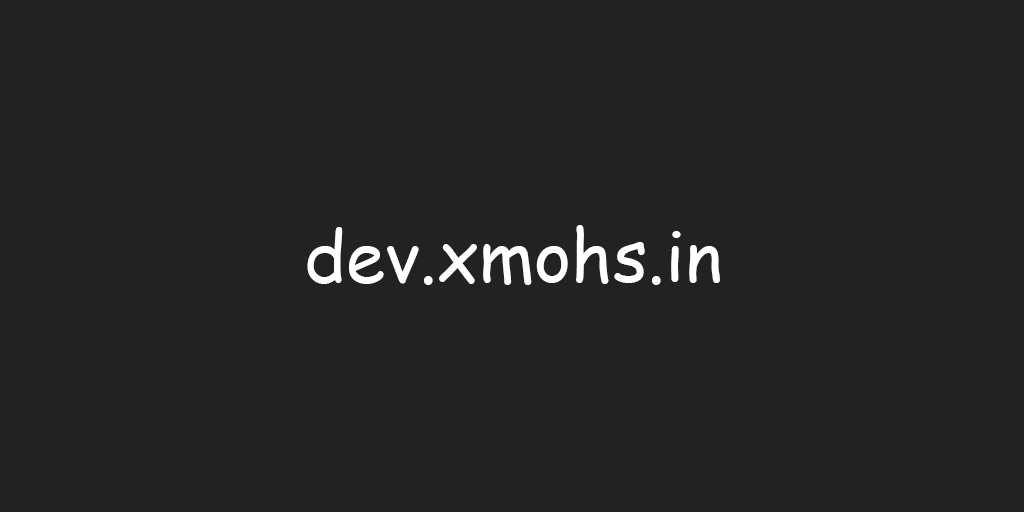
<style>
.page{position:relative;width:1024px;height:512px;background:#222222}
.page>*{position:absolute;margin:0}
.t1{font:71.1px "ComicSansMS";color:#ffffff}
</style>
<div class="page">
<p class="t1" style="left:307px;top:225px;width:413px;height:60px">dev.xmohs.in</p>
</div>
